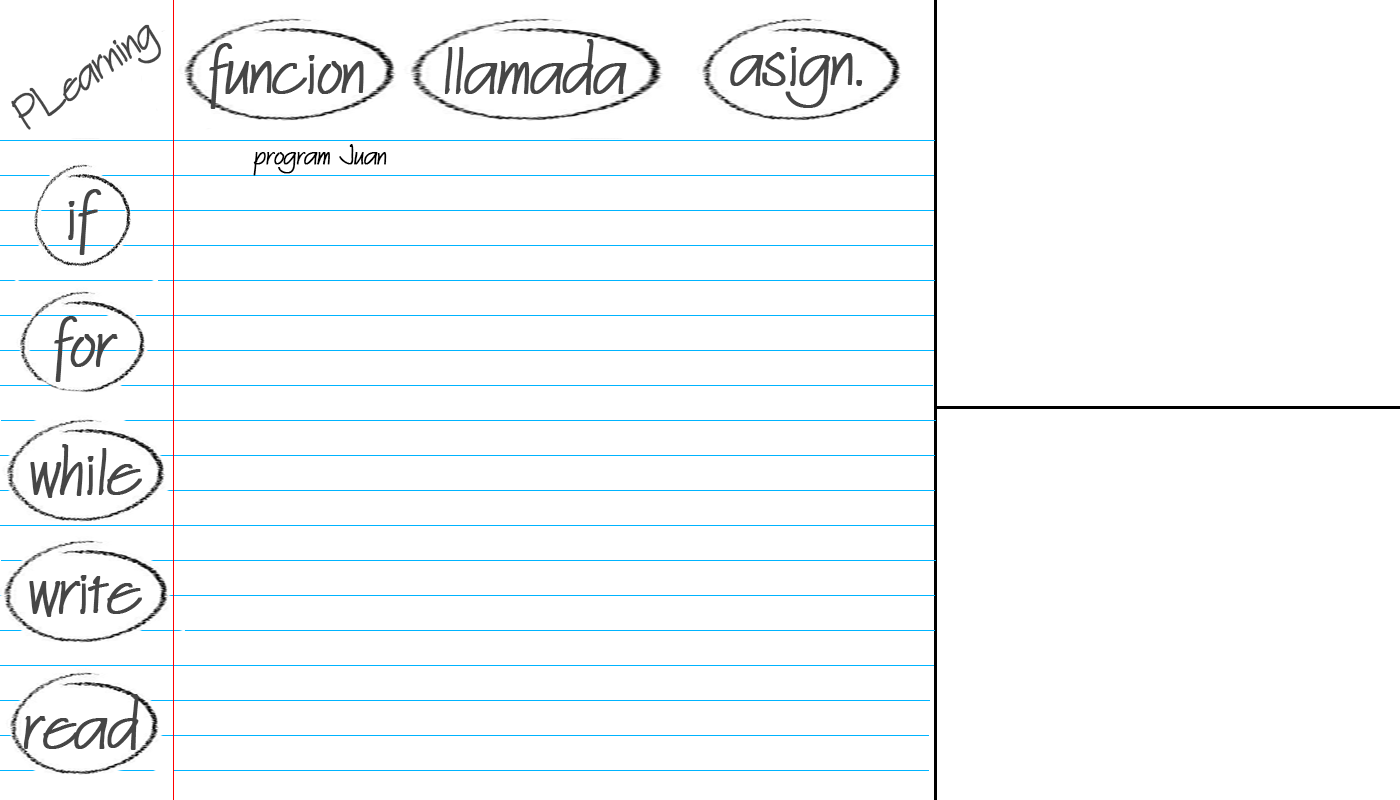
<style>
.page{position:relative;width:1400px;height:800px;background:#ffffff}
.page>*{position:absolute;margin:0}
.t1{font:48px "Architext";color:#464646;font-weight:bold}
.t2{font:75px "Architext";color:#464646;font-weight:bold}
.t3{font:30px "Architext";color:#000000;font-weight:bold}
</style>
<div class="page">
<p class="t1" style="left:11px;top:24px;width:150px;height:106px;rotate:-35deg">PLearning</p>
<p class="t2" style="left:444px;top:39px;width:183px;height:56px">llamada</p>
<p class="t2" style="left:209px;top:43px;width:155px;height:66px">funcion</p>
<p class="t2" style="left:730px;top:47px;width:133px;height:61px">asign.</p>
<p class="t3" style="left:253px;top:144px;width:134px;height:32px">program Juan</p>
<p class="t2" style="left:68px;top:189px;width:34px;height:66px">if</p>
<p class="t2" style="left:54px;top:316px;width:64px;height:66px">for</p>
<p class="t2" style="left:30px;top:444px;width:112px;height:54px">while</p>
<p class="t2" style="left:29px;top:575px;width:113px;height:42px">write</p>
<p class="t2" style="left:23px;top:694px;width:116px;height:56px">read</p>
</div>
